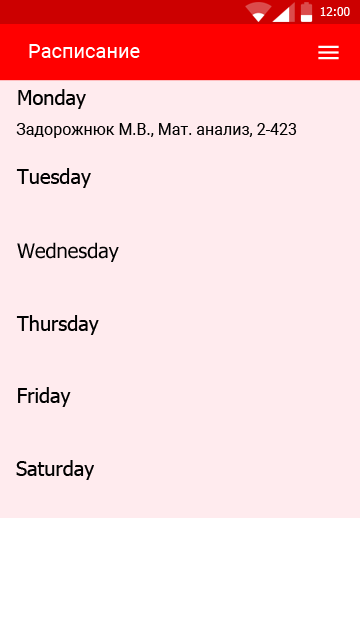
<style>
.page{position:relative;width:360px;height:640px;background:#ffebee}
.page>*{position:absolute;margin:0}
.t1{font:12px "Tahoma";color:#ffffff}
.t2{font:20px "Roboto-Regular";color:#ffffff}
.t3{font:20px "Tahoma";color:#000000}
.t4{font:16px "Roboto-Regular";color:#000000}
</style>
<div class="page">
<p class="t1" style="left:320px;top:7px;width:30px;height:9px">12:00</p>
<p class="t2" style="left:29px;top:44px;width:111px;height:14px">Расписание</p>
<p class="t3" style="left:18px;top:89px;width:68px;height:20px">Monday</p>
<p class="t4" style="left:16px;top:123px;width:281px;height:15px">Задорожнюк М.В., Мат. анализ, 2-423</p>
<p class="t3" style="left:16px;top:168px;width:75px;height:20px">Tuesday</p>
<p class="t3" style="left:17px;top:242px;width:102px;height:20px">Wednesday</p>
<p class="t3" style="left:16px;top:315px;width:83px;height:20px">Thursday</p>
<p class="t3" style="left:18px;top:387px;width:53px;height:20px">Friday</p>
<p class="t3" style="left:16px;top:460px;width:78px;height:20px">Saturday</p>
</div>
